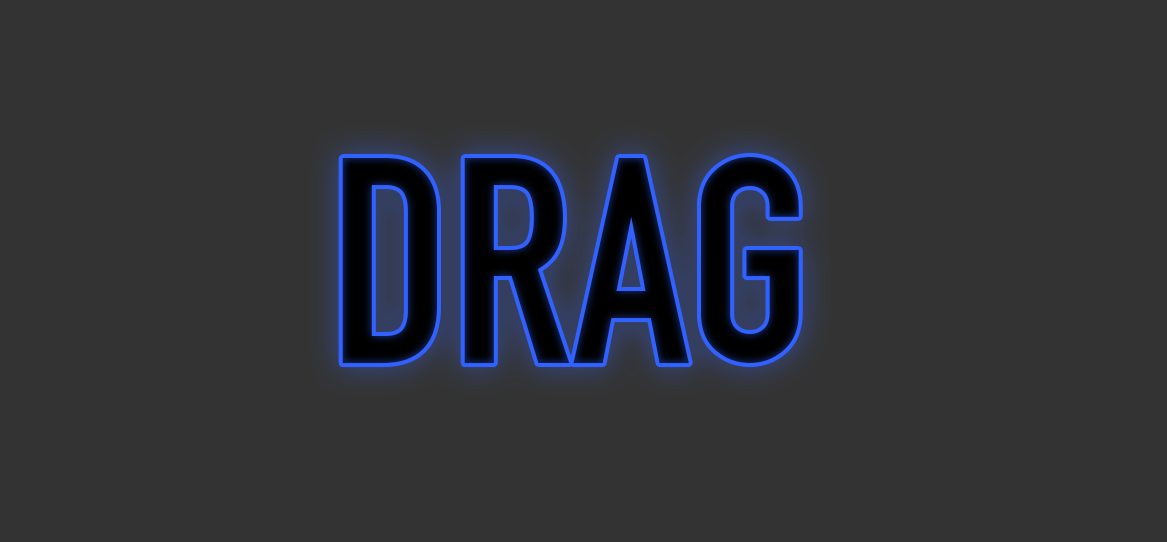
<style>
.page{position:relative;width:1167px;height:542px;background:#333333}
.page>*{position:absolute;margin:0}
.t1{font:285.8px "DINEngschrift";color:#010205}
</style>
<div class="page">
<p class="t1" style="left:342px;top:157px;width:457px;height:207px">DRAG</p>
</div>
